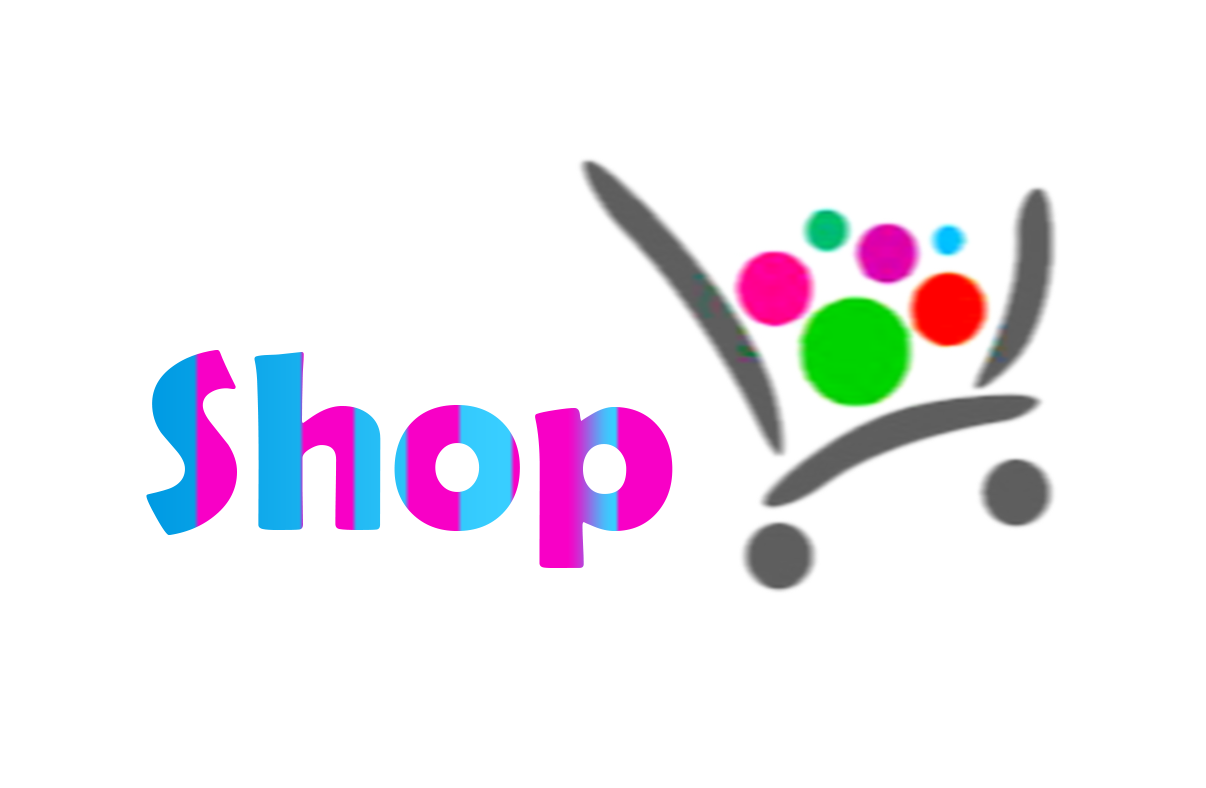
<style>
.page{position:relative;width:1206px;height:788px;background:#ffffff}
.page>*{position:absolute;margin:0}
.t1{font:254.1px "BerlinSansFBDemi-Bold"}
</style>
<div class="page">
<p class="t1" style="left:146px;top:350px;width:527px;height:218px">Shop</p>
</div>
